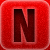
<style>
.page{position:relative;width:50px;height:50px}
.page>*{position:absolute;margin:0}
.t1{font:43.9px "HelveticaLT-Condensed-Black";letter-spacing:0.075em;color:#4f0000}
</style>
<div class="page">
<p class="t1" style="left:13px;top:9px;width:22px;height:33px">N</p>
</div>
